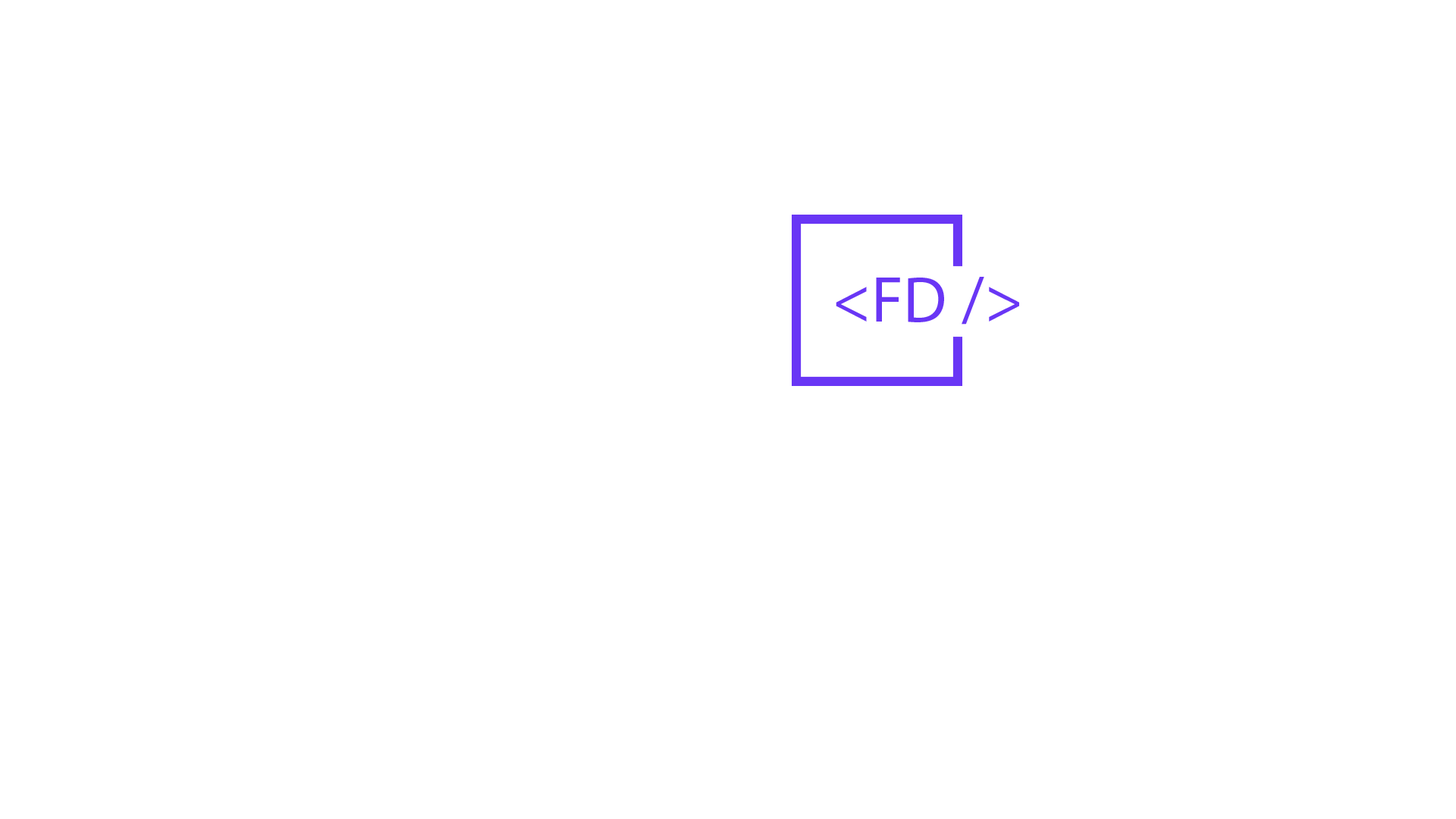
<style>
.page{position:relative;width:1456px;height:819px;background:#ffffff}
.page>*{position:absolute;margin:0}
.t1{font:65.2px "MyriadPro-Regular";letter-spacing:0.005em;color:#6936f5}
</style>
<div class="page">
<p class="t1" style="left:836px;top:277px;width:183px;height:48px">&lt;FD /&gt;</p>
</div>
